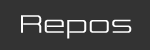
<style>
.page{position:relative;width:150px;height:50px;background:#333333}
.page>*{position:absolute;margin:0}
.t1{font:24px "Expansiva";color:#ffffff;font-weight:bold}
</style>
<div class="page">
<p class="t1" style="left:21px;top:15px;width:111px;height:24px">Repos</p>
</div>
